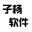
<style>
.page{position:relative;width:32px;height:32px;background:#ffffff}
.page>*{position:absolute;margin:0}
.t1{font:10px "hzgb";color:#000000}
</style>
<div class="page">
<p class="t1" style="left:2px;top:4px;width:20px;height:10px">子杨</p>
<p class="t1" style="left:9px;top:17px;width:20px;height:10px">软件</p>
</div>
